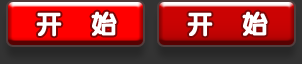
<style>
.page{position:relative;width:302px;height:64px}
.page>*{position:absolute;margin:0}
.t1{font:26px "JCuYuan";letter-spacing:0.4em;color:#ffffff;font-weight:bold}
</style>
<div class="page">
<p class="t1" style="left:36px;top:11px;width:81px;height:26px">开 始</p>
<p class="t1" style="left:187px;top:11px;width:81px;height:26px">开 始</p>
</div>
